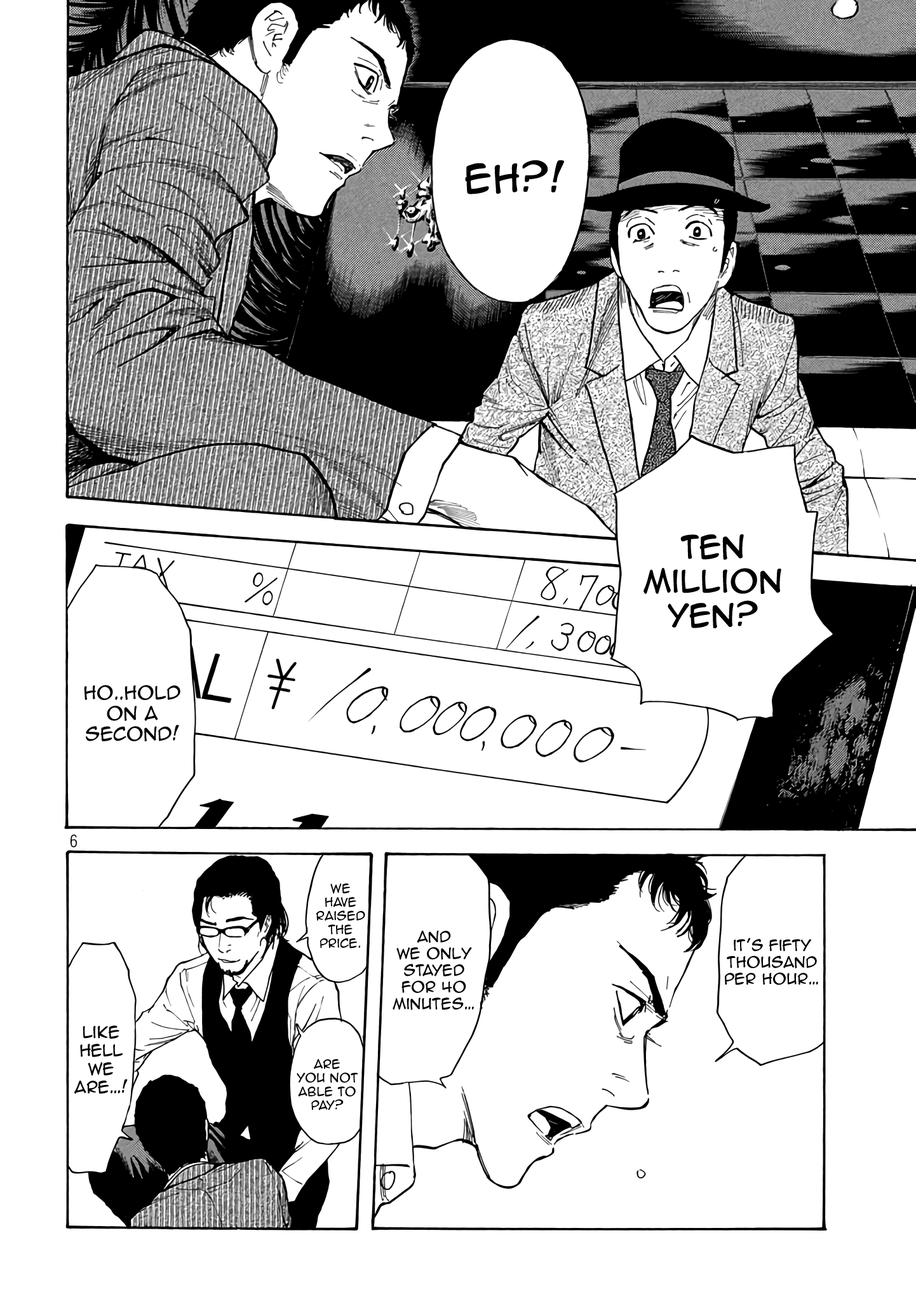
<style>
.page{position:relative;width:916px;height:1301px;background:#ffffff}
.page>*{position:absolute;margin:0}
.t1{font:35.6px "AnimeAce2.0BB";color:#000000;font-weight:bold}
.t2{font:28.6px "AnimeAce2.0BB";color:#000000;font-weight:bold}
.t3{font:17.2px "AnimeAce2.0BB";color:#000000}
.t4{font:11.4px "AnimeAce2.0BB";color:#000000}
.t5{font:14px "AnimeAce2.0BB";color:#000000}
.t6{font:15.3px "AnimeAce2.0BB";color:#000000}
</style>
<div class="page">
<p class="t1" style="left:465px;top:160px;width:100px;height:34px">Eh?!</p>
<p class="t2" style="left:644px;top:534px;width:138px;height:94px;text-align:center">Ten Million Yen?</p>
<p class="t3" style="left:84px;top:685px;width:96px;height:57px;text-align:center">Ho..Hold on a second!</p>
<p class="t4" style="left:316px;top:883px;width:49px;height:66px;text-align:center">We have raised the price.</p>
<p class="t5" style="left:393px;top:931px;width:81px;height:79px;text-align:center">And <br>we only <br>stayed <br>for 40 minutes…</p>
<p class="t5" style="left:725px;top:938px;width:93px;height:48px;text-align:center">it’s fifty <br>thousand per hour…</p>
<p class="t6" style="left:74px;top:1026px;width:54px;height:68px;text-align:center">Like hell we are…!</p>
<p class="t4" style="left:297px;top:1059px;width:61px;height:52px;text-align:center">Are<br>you not able to pay?</p>
</div>
